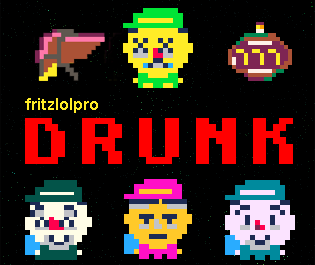
<style>
.page{position:relative;width:315px;height:265px;background:#000000}
.page>*{position:absolute;margin:0}
.t1{font:18px "FranklinGothic-Medium";color:#ffec27}
.t2{font:53.1px "pypx-B";letter-spacing:0.2em;color:#ff0000}
</style>
<div class="page">
<p class="t1" style="left:25px;top:98px;width:73px;height:15px">fritzlolpro</p>
<p class="t2" style="left:25px;top:118px;width:268px;height:46px">DRUNK</p>
</div>
